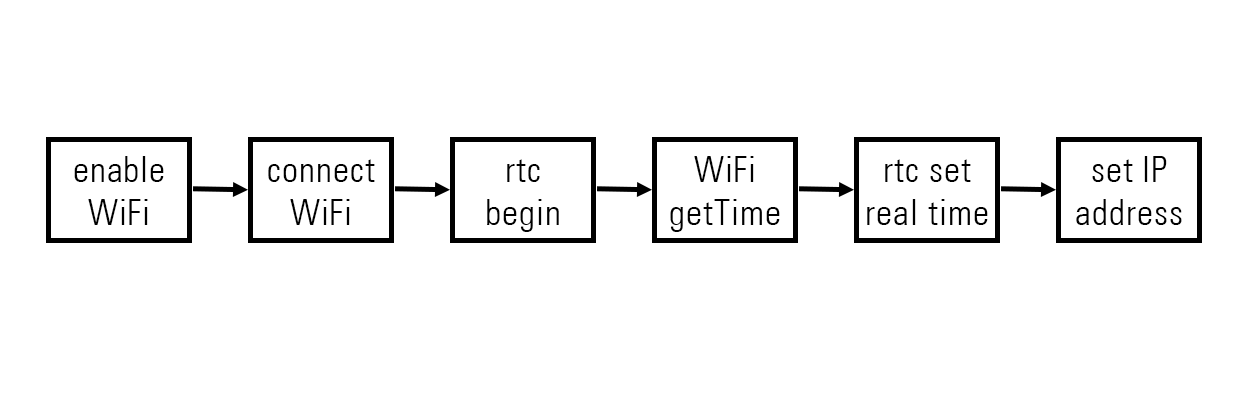
<style>
.page{position:relative;width:1249px;height:405px;background:#ffffff}
.page>*{position:absolute;margin:0}
.t1{font:36px "UniversLT-CondensedLight";letter-spacing:0.025em;color:#000000}
</style>
<div class="page">
<p class="t1" style="left:74px;top:156px;width:90px;height:69px;text-align:center">enable<br>WiFi</p>
<p class="t1" style="left:268px;top:159px;width:107px;height:66px;text-align:center">connect<br>WiFi</p>
<p class="t1" style="left:487px;top:159px;width:72px;height:73px;text-align:center">rtc<br>begin</p>
<p class="t1" style="left:670px;top:156px;width:110px;height:76px;text-align:center">WiFi<br>getTime</p>
<p class="t1" style="left:867px;top:159px;width:121px;height:66px;text-align:center">rtc set<br>real time</p>
<p class="t1" style="left:1076px;top:156px;width:106px;height:69px;text-align:center">set IP<br>address</p>
</div>
